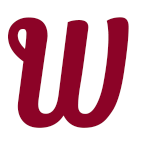
<style>
.page{position:relative;width:144px;height:144px;background:#ffffff}
.page>*{position:absolute;margin:0}
.t1{font:144px "LilyScriptOne-Regular";color:#8c0327}
</style>
<div class="page">
<p class="t1" style="left:8px;top:17px;width:121px;height:111px">W</p>
</div>
